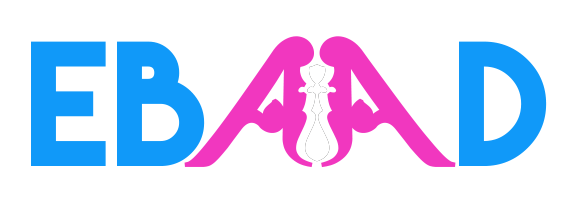
<style>
.page{position:relative;width:578px;height:219px;background:#ffffff}
.page>*{position:absolute;margin:0}
.t1{font:158px "LemonMilk";color:#1099f9}
.t2{font:158px "WayangPatran-Regular";letter-spacing:-0.26em;color:#f137bf;font-weight:bold}
.t3{font:158px "WayangPatran-Regular";color:#f137bf;font-weight:bold;scale:1.05 1}
</style>
<div class="page">
<p class="t1" style="left:31px;top:41px;width:516px;height:125px">EB               D</p>
<p class="t2" style="left:184px;top:36px;width:130px;height:132px">A</p>
<p class="t3" style="left:319px;top:36px;width:137px;height:132px;rotate:180deg">A</p>
</div>
